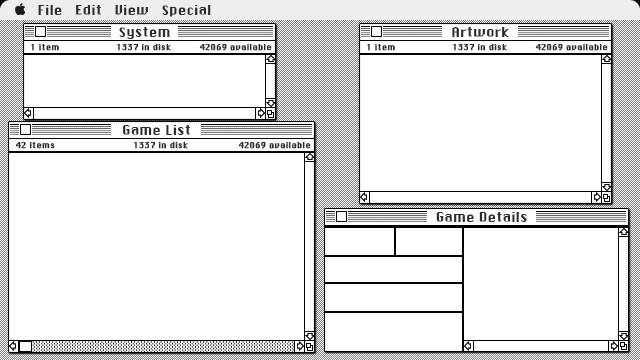
<style>
.page{position:relative;width:640px;height:360px;background:#ffffff}
.page>*{position:absolute;margin:0}
.t1{font:13px "ChicagoFLF";color:#2c2c2c}
.t2{font:8px "ChicagoFLF";color:#2c2c2c;font-weight:bold}
</style>
<div class="page">
<p class="t1" style="left:38px;top:5px;width:173px;height:12px">File   Edit   View   Special</p>
<p class="t1" style="left:119px;top:27px;width:51px;height:12px">System</p>
<p class="t1" style="left:452px;top:27px;width:57px;height:10px">Artwork</p>
<p class="t2" style="left:31px;top:43px;width:28px;height:8px">1 item</p>
<p class="t2" style="left:117px;top:43px;width:54px;height:8px">1337 in disk</p>
<p class="t2" style="left:199px;top:43px;width:73px;height:8px">42069 available</p>
<p class="t2" style="left:367px;top:43px;width:28px;height:8px">1 item</p>
<p class="t2" style="left:453px;top:43px;width:54px;height:8px">1337 in disk</p>
<p class="t2" style="left:535px;top:43px;width:73px;height:8px">42069 available</p>
<p class="t1" style="left:123px;top:125px;width:67px;height:10px">Game List</p>
<p class="t2" style="left:15px;top:141px;width:40px;height:8px">42 items</p>
<p class="t2" style="left:134px;top:141px;width:54px;height:8px">1337 in disk</p>
<p class="t2" style="left:238px;top:141px;width:73px;height:8px">42069 available</p>
<p class="t1" style="left:436px;top:212px;width:91px;height:10px">Game Details</p>
</div>
